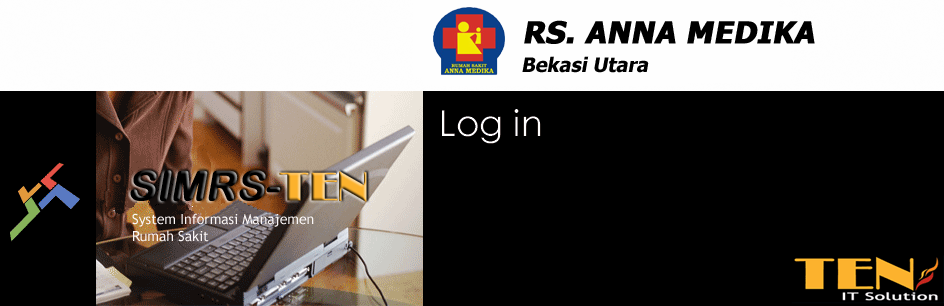
<style>
.page{position:relative;width:944px;height:306px;background:#000000}
.page>*{position:absolute;margin:0}
.t1{font:30.1px "Tahoma-Bold";color:#000000;font-weight:bold;font-style:italic}
.t2{font:19.9px "Tahoma-Bold";color:#000000;font-style:italic}
.t3{font:41.1px "ArialRoundedMTBold";color:#000000;font-weight:bold;font-style:italic}
.t4{font:41.1px "Broadway";color:#fcb22d;font-weight:bold}
.t5{font:13.9px "TrebuchetMS";color:#fbf7f7}
</style>
<div class="page">
<p class="t1" style="left:524px;top:20px;width:291px;height:24px">RS. ANNA MEDIKA</p>
<p class="t2" style="left:522px;top:56px;width:127px;height:17px">Bekasi Utara</p>
<p class="t3" style="left:130px;top:170px;width:237px;height:32px">SIMRS-<span class="t4">TEN</span></p>
<p class="t5" style="left:132px;top:213px;width:182px;height:29px">System Informasi Manajemen<br>Rumah Sakit</p>
</div>
